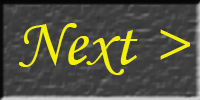
<style>
.page{position:relative;width:200px;height:100px}
.page>*{position:absolute;margin:0}
.t1{font:67px "MonotypeCorsiva";color:#f4f104}
</style>
<div class="page">
<p class="t1" style="left:19px;top:23px;width:171px;height:52px">Next &gt;</p>
</div>
